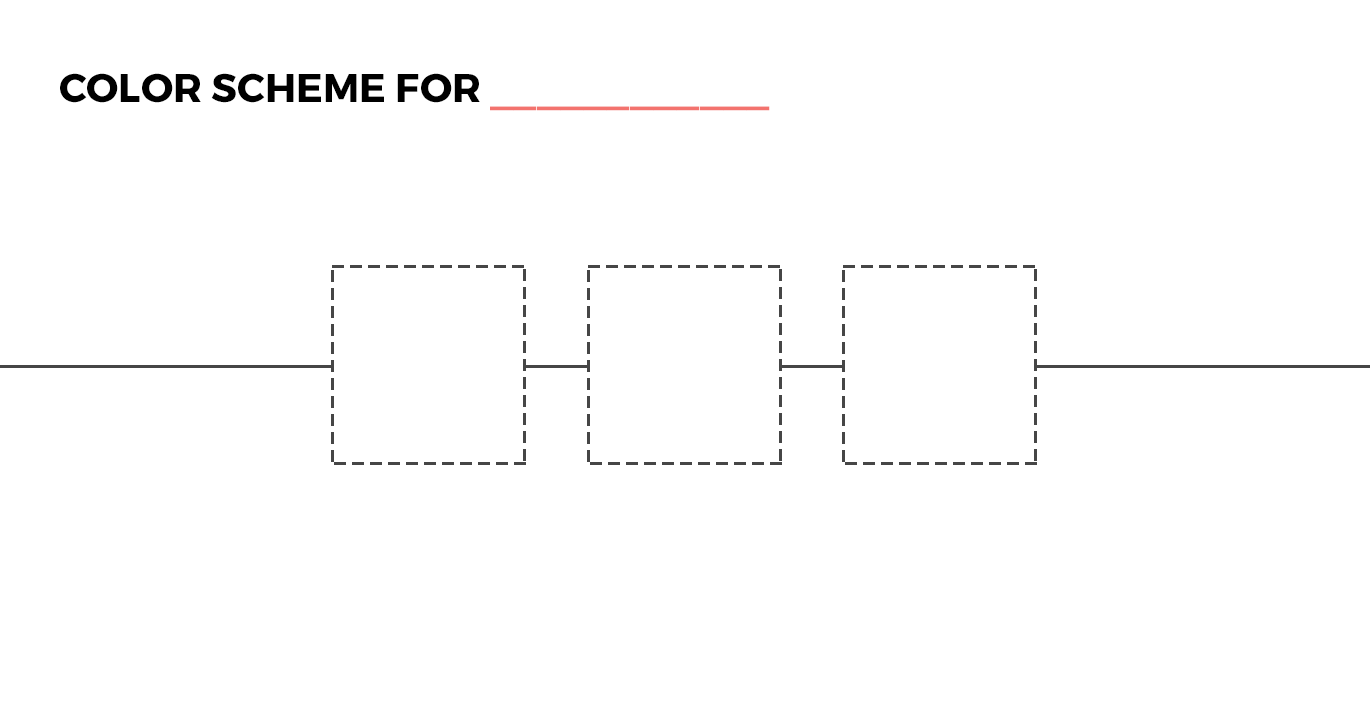
<style>
.page{position:relative;width:1370px;height:712px;background:#ffffff}
.page>*{position:absolute;margin:0}
.t1{font:40px "Montserrat-Bold";color:#000000;text-transform:uppercase}
.t2{font:40px "Montserrat-Bold";color:#f3736e;text-transform:uppercase}
</style>
<div class="page">
<p class="t1" style="left:60px;top:73px;width:710px;height:38px">Color Scheme for <span class="t2">____________</span></p>
</div>
